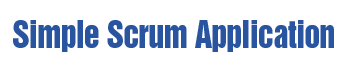
<style>
.page{position:relative;width:350px;height:67px;background:#ffffff}
.page>*{position:absolute;margin:0}
.t1{font:35px "HelveticaInseratLTStd-Roman";letter-spacing:-0.02em;color:#29549f;scale:0.9 1}
</style>
<div class="page">
<p class="t1" style="left:13px;top:20px;width:321px;height:32px">Simple Scrum Application</p>
</div>
